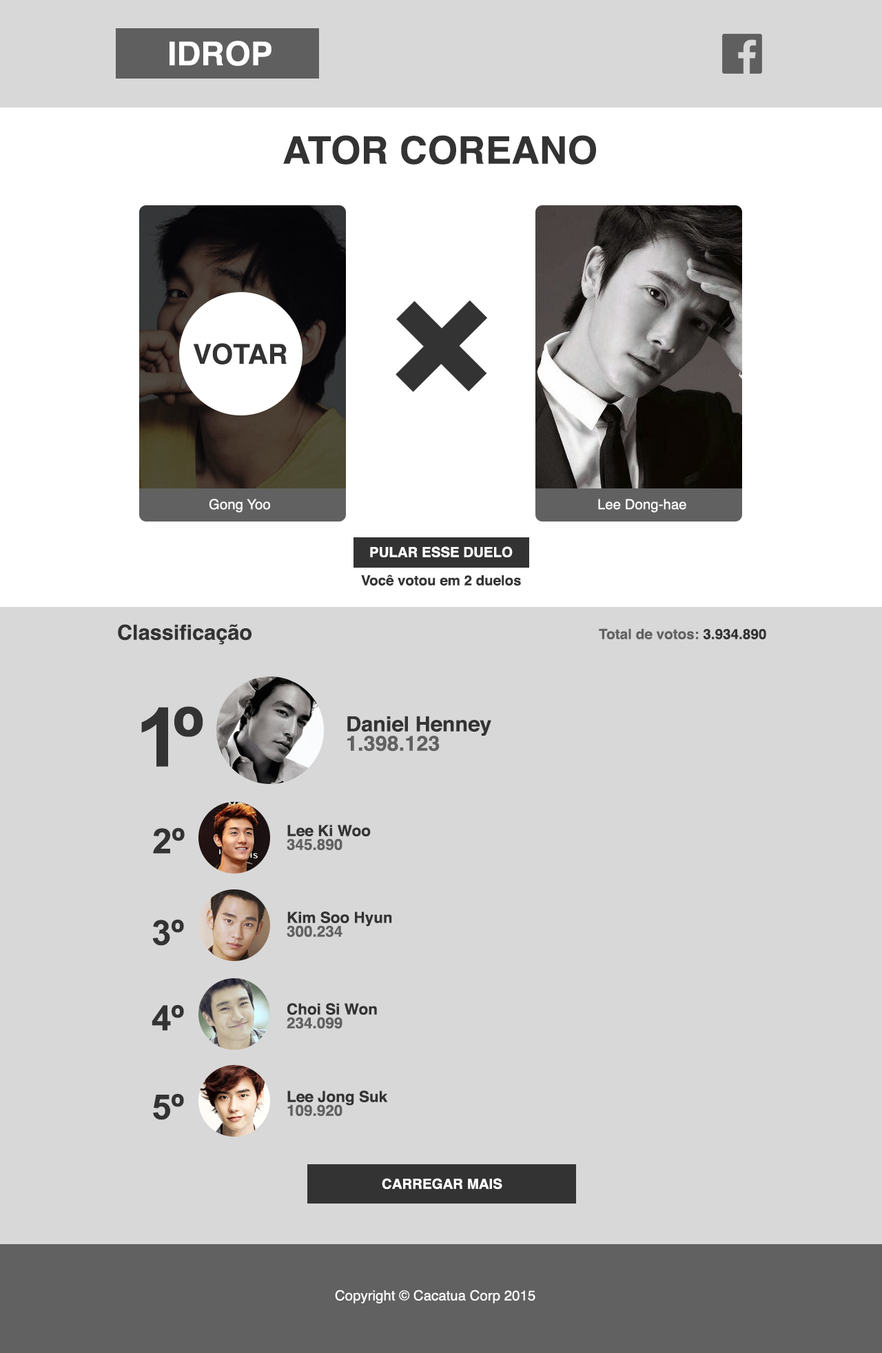
<style>
.page{position:relative;width:882px;height:1353px;background:#d8d8d8}
.page>*{position:absolute;margin:0}
.t1{font:32.5px "Helvetica-Bold";color:#ffffff}
.t2{font:37.9px "Helvetica-Bold";color:#333333}
.t3{font:192.9px "Helvetica-Bold";color:#333333}
.t4{font:27.5px "Helvetica-Bold";color:#333333}
.t5{font:13.8px "Helvetica";color:#ffffff}
.t6{font:13.8px "Helvetica-Bold";color:#ffffff}
.t7{font:13.8px "Helvetica-Bold";color:#333333}
.t8{font:20.7px "Helvetica-Bold";color:#333333}
.t9{font:13.9px "Helvetica-Bold";color:#616161}
.t10{font:13.9px "Helvetica-Bold";color:#333333}
.t11{font:82.2px "Arial-BoldMT";letter-spacing:-0.1em;color:#333333}
.t12{font:20.7px "Helvetica-Bold";color:#616161}
.t13{font:34.7px "Arial-BoldMT";color:#333333}
.t14{font:15.2px "Helvetica-Bold";color:#333333}
.t15{font:15.2px "Helvetica-Bold";color:#616161}
</style>
<div class="page">
<p class="t1" style="left:169px;top:41px;width:102px;height:25px">IDROP</p>
<p class="t2" style="left:283px;top:135px;width:313px;height:30px">ATOR COREANO</p>
<p class="t3" style="left:395px;top:300px;width:92px;height:92px;rotate:-45deg">+</p>
<p class="t4" style="left:193px;top:343px;width:94px;height:21px">VOTAR</p>
<p class="t5" style="left:209px;top:499px;width:61px;height:13px">Gong Yoo</p>
<p class="t5" style="left:598px;top:499px;width:88px;height:13px">Lee Dong-hae</p>
<p class="t6" style="left:370px;top:546px;width:142px;height:11px">PULAR ESSE DUELO</p>
<p class="t7" style="left:361px;top:574px;width:160px;height:11px">Você votou em 2 duelos</p>
<p class="t8" style="left:118px;top:624px;width:133px;height:21px">Classificação</p>
<p class="t9" style="left:598px;top:628px;width:168px;height:11px">Total de votos: <span class="t10">3.934.890</span></p>
<p class="t11" style="left:141px;top:706px;width:62px;height:61px">1º</p>
<p class="t8" style="left:347px;top:716px;width:144px;height:20px">Daniel Henney</p>
<p class="t12" style="left:347px;top:736px;width:92px;height:15px">1.398.123</p>
<p class="t13" style="left:153px;top:827px;width:32px;height:26px">2º</p>
<p class="t14" style="left:287px;top:824px;width:84px;height:12px">Lee Ki Woo</p>
<p class="t15" style="left:287px;top:838px;width:55px;height:12px">345.890</p>
<p class="t14" style="left:287px;top:911px;width:105px;height:15px">Kim Soo Hyun</p>
<p class="t13" style="left:152px;top:919px;width:32px;height:27px">3º</p>
<p class="t15" style="left:287px;top:925px;width:55px;height:12px">300.234</p>
<p class="t13" style="left:152px;top:1004px;width:32px;height:26px">4º</p>
<p class="t14" style="left:287px;top:1003px;width:90px;height:11px">Choi Si Won</p>
<p class="t15" style="left:287px;top:1017px;width:55px;height:11px">234.099</p>
<p class="t13" style="left:153px;top:1093px;width:31px;height:27px">5º</p>
<p class="t14" style="left:287px;top:1090px;width:101px;height:15px">Lee Jong Suk</p>
<p class="t15" style="left:287px;top:1104px;width:55px;height:12px">109.920</p>
<p class="t6" style="left:382px;top:1178px;width:120px;height:11px">CARREGAR MAIS</p>
<p class="t5" style="left:335px;top:1289px;width:200px;height:14px">Copyright © Cacatua Corp 2015</p>
</div>
